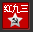
<style>
.page{position:relative;width:33px;height:32px;background:#c50000}
.page>*{position:absolute;margin:0}
.t1{font:10.4px "SimSun";letter-spacing:-0.25em;color:#ffffff}
</style>
<div class="page">
<p class="t1" style="left:4px;top:4px;width:24px;height:9px">红九三</p>
</div>
